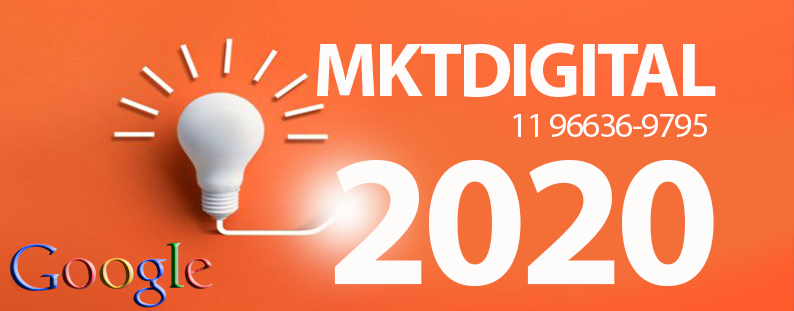
<style>
.page{position:relative;width:794px;height:311px}
.page>*{position:absolute;margin:0}
.t1{font:77px "MyriadPro-Bold";letter-spacing:-0.04em;color:#fdfcfb}
.t2{font:35px "MyriadPro-Regular";letter-spacing:-0.04em;color:#fdfcfb}
.t3{font:187px "MyriadPro-Bold";letter-spacing:-0.04em;color:#fdfcfb}
</style>
<div class="page">
<p class="t1" style="left:317px;top:43px;width:399px;height:54px">MKTDIGITAL</p>
<p class="t2" style="left:513px;top:114px;width:194px;height:23px">11 96636-9795</p>
<p class="t3" style="left:334px;top:160px;width:380px;height:126px">2020</p>
</div>
